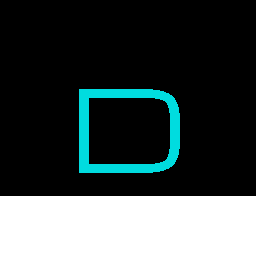
<style>
.page{position:relative;width:256px;height:256px;background:#000000}
.page>*{position:absolute;margin:0}
.t1{font:112px "Michroma";color:#00dcdf}
</style>
<div class="page">
<p class="t1" style="left:79px;top:89px;width:101px;height:84px">D</p>
</div>
